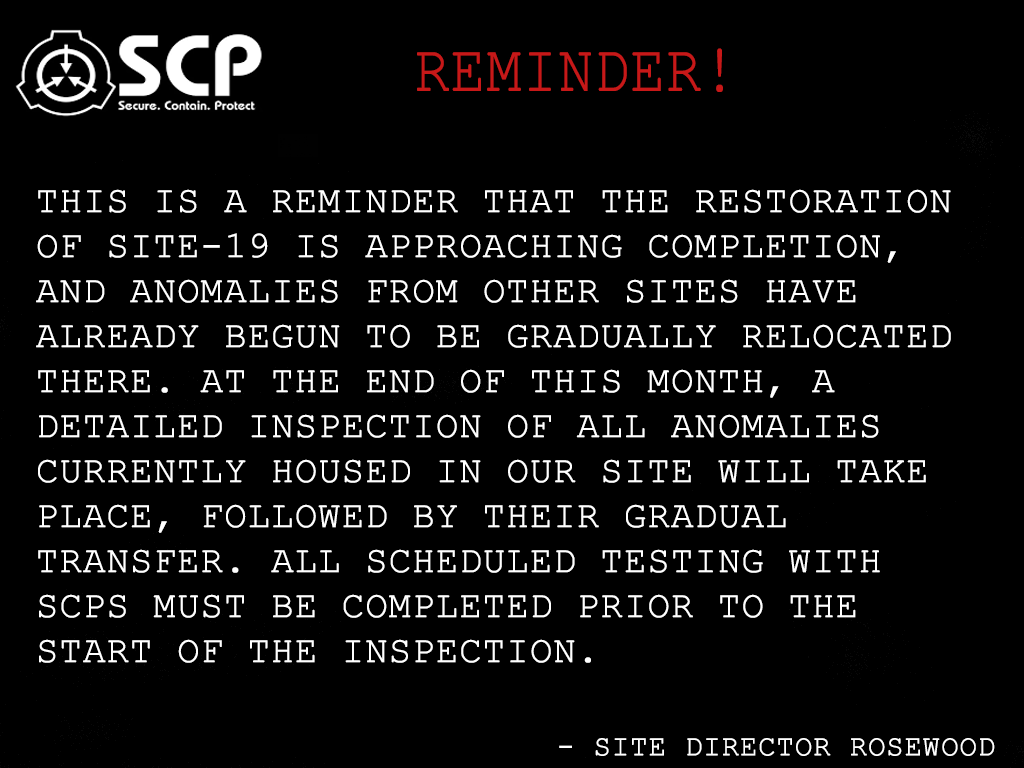
<style>
.page{position:relative;width:1024px;height:768px;background:#000000}
.page>*{position:absolute;margin:0}
.t1{font:66.7px "CourierNewPSMT";color:#c71818;text-transform:uppercase;font-weight:bold;scale:0.86 1}
.t2{font:37.5px "CourierNewPSMT";color:#ffffff;text-transform:uppercase;font-weight:bold}
.t3{font:41.7px "CourierNewPSMT";color:#ffffff;text-transform:uppercase;font-weight:bold}
.t4{font:29.2px "CourierNewPSMT";color:#ffffff;text-transform:uppercase;font-weight:bold}
</style>
<div class="page">
<p class="t1" style="left:417px;top:48px;width:306px;height:44px">Reminder!</p>
<p class="t2" style="left:36px;top:189px;width:915px;height:474px;text-align:justify"><span class="t3"><br></span>This is a reminder that the restoration of Site-19 is approaching completion, and anomalies from other sites have already begun to be gradually relocated there. At the end of this month, a detailed inspection of all anomalies currently housed in our site will take place, followed by their gradual transfer. All scheduled testing with SCPs must be completed prior to the start of the inspection.</p>
<p class="t4" style="left:559px;top:738px;width:436px;height:18px">- Site Director Rosewood</p>
</div>
